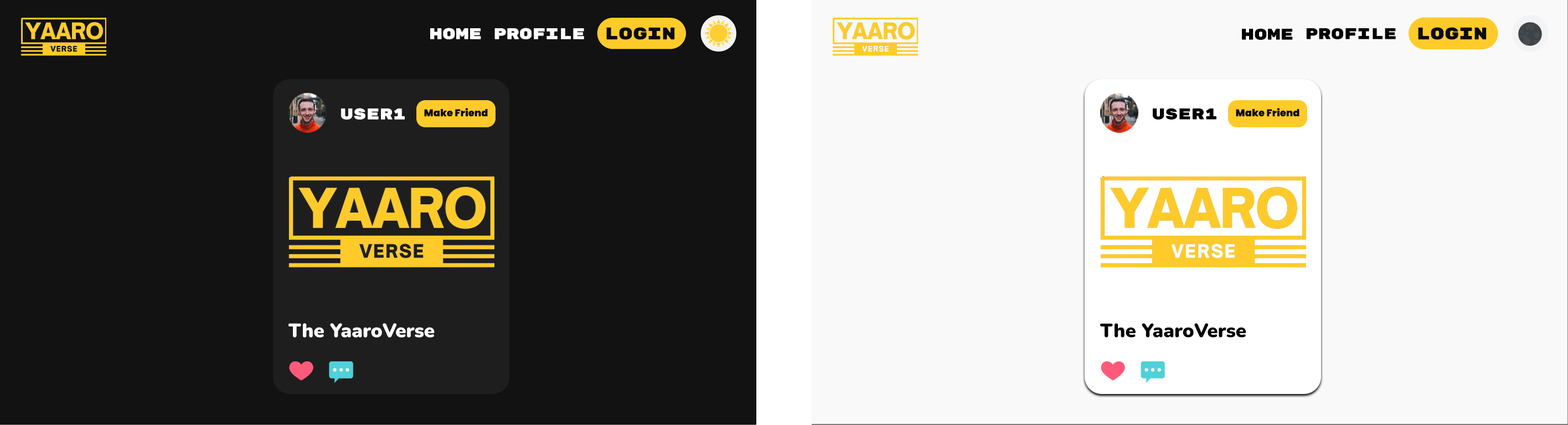
<style>
.page{position:relative;width:1568px;height:425px;background:#121212}
.page>*{position:absolute;margin:0}
.t1{font:15.5px "RubikMonoOne-Regular";color:#ffffff}
.t2{font:16.9px "RubikMonoOne-Regular";color:#0a0a0a}
.t3{font:15.5px "RubikMonoOne-Regular";color:#000000}
.t4{font:10px "Poppins-Black";color:#000000}
.t5{font:19.3px "Nunito-Black";color:#ffffff}
.t6{font:19.3px "Nunito-Black";color:#000000}
</style>
<div class="page">
<p class="t1" style="left:430px;top:28px;width:51px;height:11px">home</p>
<p class="t1" style="left:494px;top:28px;width:90px;height:11px">Profile</p>
<p class="t2" style="left:606px;top:27px;width:69px;height:13px">Login</p>
<p class="t3" style="left:1242px;top:28px;width:51px;height:12px">home</p>
<p class="t3" style="left:1306px;top:28px;width:90px;height:11px">Profile</p>
<p class="t2" style="left:1418px;top:27px;width:69px;height:13px">Login</p>
<p class="t1" style="left:341px;top:108px;width:64px;height:12px">User1</p>
<p class="t4" style="left:424px;top:108px;width:64px;height:9px">Make Friend</p>
<p class="t3" style="left:1153px;top:108px;width:63px;height:12px">User1</p>
<p class="t4" style="left:1236px;top:108px;width:63px;height:9px">Make Friend</p>
<p class="t5" style="left:288px;top:323px;width:147px;height:15px">The YaaroVerse</p>
<p class="t6" style="left:1100px;top:323px;width:146px;height:15px">The YaaroVerse</p>
</div>
